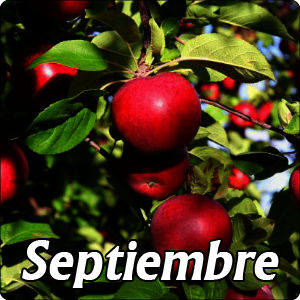
<style>
.page{position:relative;width:300px;height:300px}
.page>*{position:absolute;margin:0}
.t1{font:55.6px "Narkisim";color:#ffffff;font-weight:bold;font-style:italic}
</style>
<div class="page">
<p class="t1" style="left:22px;top:240px;width:257px;height:48px">Septiembre</p>
</div>
